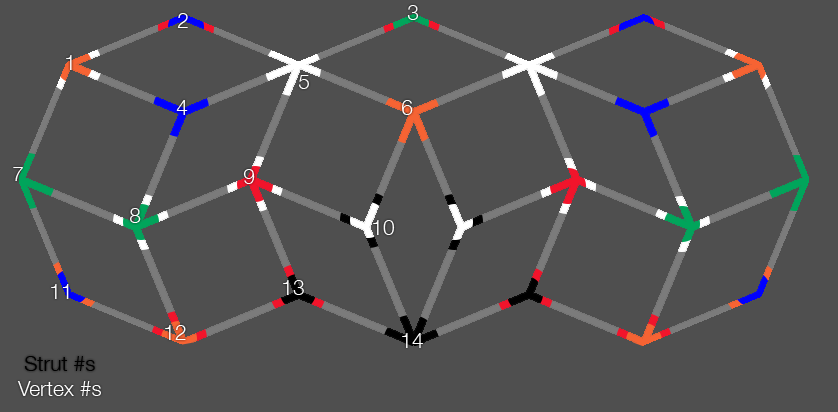
<style>
.page{position:relative;width:838px;height:412px;background:#4f4f4f}
.page>*{position:absolute;margin:0}
.t1{font:21px "HelveticaNeue-Light";color:#ffffff}
.t2{font:21px "HelveticaNeue-Light";color:#fefefe}
.t3{font:21px "HelveticaNeue-Light";color:#000000}
</style>
<div class="page">
<p class="t1" style="left:407px;top:5px;width:12px;height:15px">3</p>
<p class="t1" style="left:177px;top:13px;width:11px;height:15px">2</p>
<p class="t1" style="left:66px;top:55px;width:6px;height:15px">1</p>
<p class="t1" style="left:299px;top:75px;width:10px;height:14px">5</p>
<p class="t1" style="left:176px;top:100px;width:12px;height:15px">4</p>
<p class="t1" style="left:402px;top:100px;width:11px;height:15px">6</p>
<p class="t1" style="left:13px;top:167px;width:10px;height:14px">7</p>
<p class="t1" style="left:243px;top:169px;width:12px;height:15px">9</p>
<p class="t1" style="left:130px;top:208px;width:11px;height:15px">8</p>
<p class="t1" style="left:373px;top:220px;width:22px;height:15px">10</p>
<p class="t1" style="left:283px;top:280px;width:21px;height:15px">13</p>
<p class="t1" style="left:51px;top:284px;width:18px;height:15px">11</p>
<p class="t1" style="left:165px;top:325px;width:21px;height:15px">12</p>
<p class="t1" style="left:402px;top:333px;width:21px;height:15px">14</p>
<p class="t2" style="left:17px;top:356px;width:84px;height:40px;text-align:center"><span class="t3">Strut #s<br></span>Vertex #s</p>
</div>
